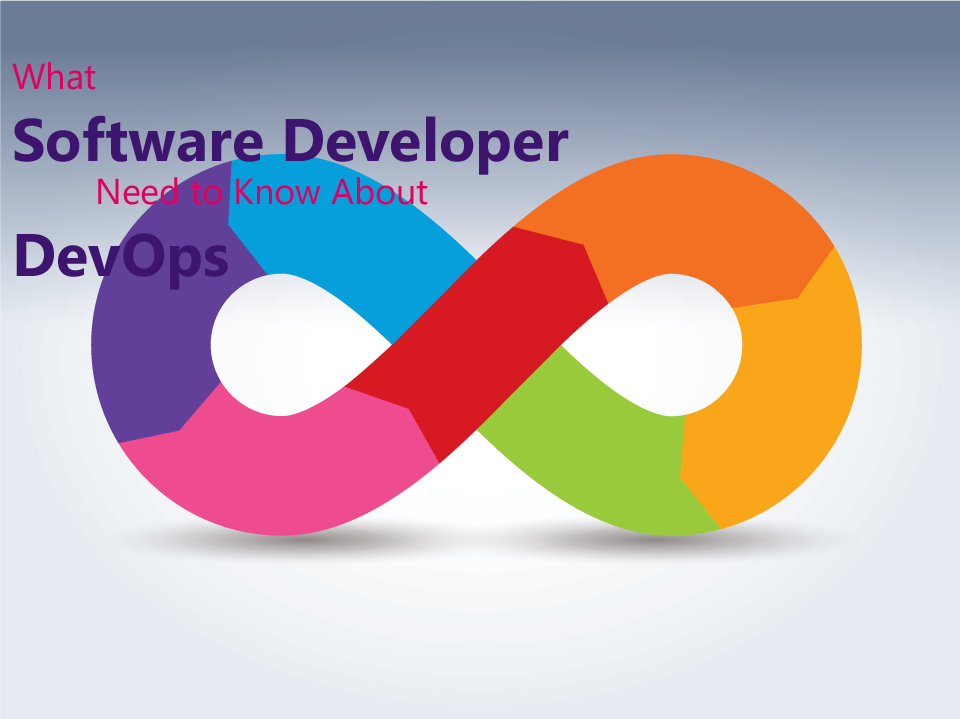
<style>
.page{position:relative;width:960px;height:719px}
.page>*{position:absolute;margin:0}
.t1{font:60px "MyanmarText-Bold";color:#3d156e}
.t2{font:36px "MyanmarText";color:#e10060}
</style>
<div class="page">
<p class="t1" style="left:12px;top:62px;width:557px;height:228px"><span class="t2">What <br></span>Software Developer<br> <span class="t2">Need to Know About<br></span>DevOps</p>
</div>
